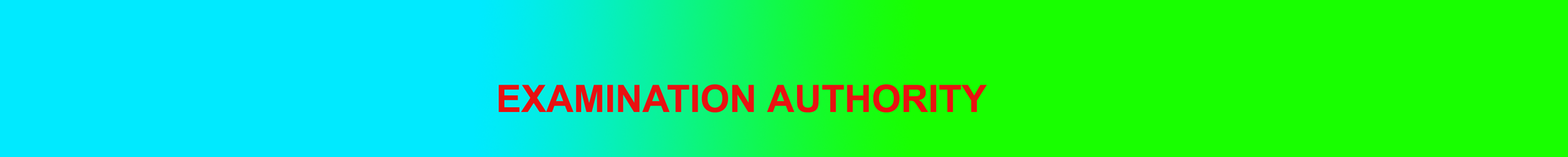
<style>
.page{position:relative;width:1568px;height:157px;background:#18ff00}
.page>*{position:absolute;margin:0}
.t1{font:37.6px "Arial-BoldMT";color:#e91111}
</style>
<div class="page">
<p class="t1" style="left:499px;top:84px;width:488px;height:28px">EXAMINATION AUTHORITY<br>ASDF</p>
</div>
